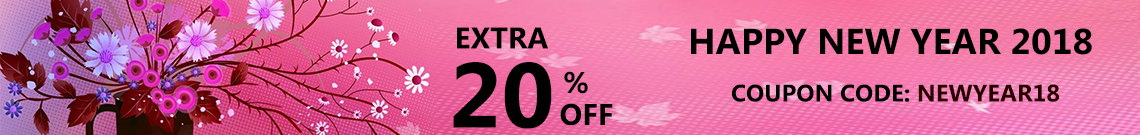
<style>
.page{position:relative;width:1140px;height:135px}
.page>*{position:absolute;margin:0}
.t1{font:30px "MicrosoftPhagsPa-Bold";color:#000000}
.t2{font:36px "MicrosoftPhagsPa-Bold";color:#000000}
.t3{font:92px "MicrosoftPhagsPa-Bold";color:#000000}
.t4{font:24px "MicrosoftPhagsPa-Bold";color:#000000}
.t5{font:24px "MicrosoftPhagsPa-Bold";color:#290000}
</style>
<div class="page">
<p class="t1" style="left:457px;top:27px;width:91px;height:22px">EXTRA</p>
<p class="t2" style="left:691px;top:28px;width:401px;height:27px">HAPPY NEW YEAR 2018</p>
<p class="t3" style="left:453px;top:62px;width:99px;height:67px">20</p>
<p class="t1" style="left:564px;top:71px;width:24px;height:23px">%</p>
<p class="t4" style="left:731px;top:84px;width:329px;height:18px">COUPON CODE: <span class="t5">NEWYEAR18</span></p>
<p class="t1" style="left:560px;top:103px;width:53px;height:23px">OFF</p>
</div>
